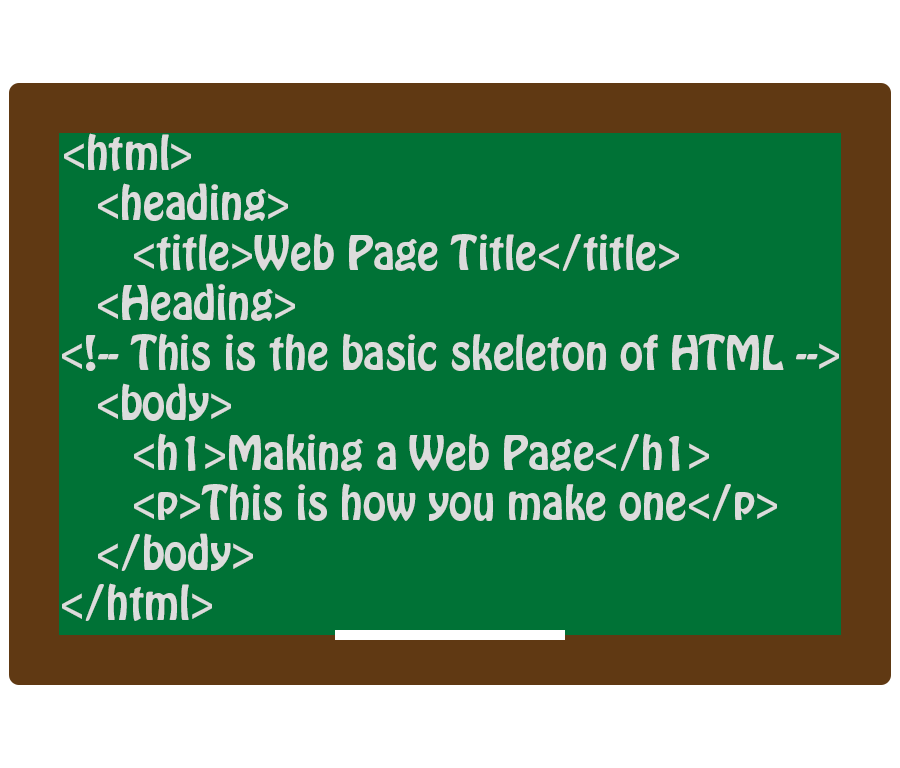
<style>
.page{position:relative;width:900px;height:768px;background:#007236}
.page>*{position:absolute;margin:0}
.t1{font:41.7px "HoboStd";color:#dcdcdc}
</style>
<div class="page">
<p class="t1" style="left:62px;top:133px;width:777px;height:488px">&lt;html&gt;<br> &lt;heading&gt;<br>  &lt;title&gt;Web Page Title&lt;/title&gt;<br> &lt;Heading&gt;<br>&lt;!-- This is the basic skeleton of HTML --&gt;<br> &lt;body&gt;<br>  &lt;h1&gt;Making a Web Page&lt;/h1&gt;<br>  &lt;p&gt;This is how you make one&lt;/p&gt;<br> &lt;/body&gt;<br>&lt;/html&gt;</p>
</div>
